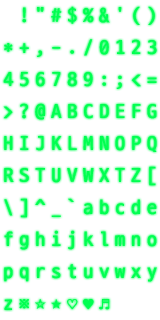
<style>
.page{position:relative;width:160px;height:320px;background:#ffffff}
.page>*{position:absolute;margin:0}
.t1{font:20px/32px "D2Coding";letter-spacing:0.272em;color:#00ff50;font-weight:bold}
</style>
<div class="page">
<p class="t1" style="left:3px;top:6px;width:154px;height:304px">!"#$%&amp;'()<br>*+,-./0123<br>456789:;&lt;=<br>&gt;?@ABCDEFG<br>HIJKLMNOPQ<br>RSTUVWXTZ[<br>\]^_`abcde<br>fghijklmno<br>pqrstuvwxy<br>z※☆★♡♥♬</p>
</div>
